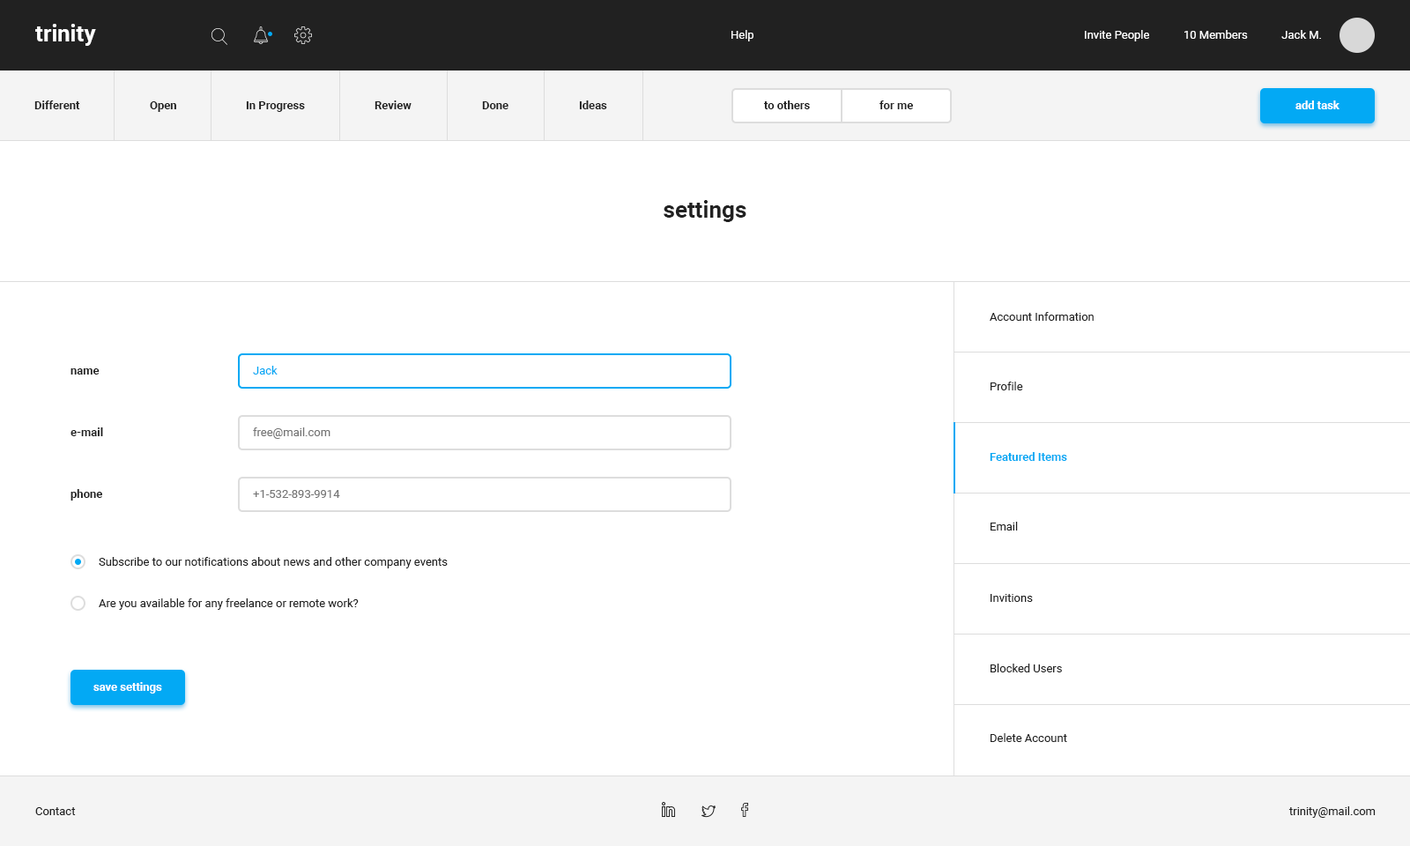
<style>
.page{position:relative;width:1410px;height:846px;background:#ffffff}
.page>*{position:absolute;margin:0}
.t1{font:22.9px "Roboto-Bold";color:#ffffff}
.t2{font:11.5px "Roboto-Regular";color:#ffffff}
.t3{font:11.5px "Roboto-Bold";color:#212121}
.t4{font:11.5px "Roboto-Bold";color:#ffffff}
.t5{font:22.9px "Roboto-Bold";color:#212121}
.t6{font:11.5px "Roboto-Regular";color:#212121}
.t7{font:11.5px "Roboto-Regular";color:#03a9f4}
.t8{font:11.5px "Roboto-Regular";color:#757575}
.t9{font:11.5px "Roboto-Bold";color:#03a9f4}
</style>
<div class="page">
<p class="t1" style="left:35px;top:24px;width:61px;height:22px">trinity</p>
<p class="t2" style="left:731px;top:30px;width:22px;height:11px">Help</p>
<p class="t2" style="left:1085px;top:30px;width:236px;height:11px">Invite People            10 Members            Jack M.</p>
<p class="t3" style="left:34px;top:100px;width:46px;height:9px">Different</p>
<p class="t3" style="left:150px;top:101px;width:26px;height:11px">Open</p>
<p class="t3" style="left:246px;top:101px;width:59px;height:11px">In Progress</p>
<p class="t3" style="left:374px;top:100px;width:37px;height:9px">Review</p>
<p class="t3" style="left:482px;top:101px;width:26px;height:8px">Done</p>
<p class="t3" style="left:579px;top:100px;width:28px;height:9px">Ideas</p>
<p class="t3" style="left:763px;top:100px;width:47px;height:9px">to others</p>
<p class="t3" style="left:879px;top:100px;width:34px;height:9px">for me</p>
<p class="t4" style="left:1295px;top:100px;width:44px;height:9px">add task</p>
<p class="t5" style="left:663px;top:200px;width:83px;height:22px">settings</p>
<p class="t6" style="left:989px;top:312px;width:104px;height:9px">Account Information</p>
<p class="t7" style="left:253px;top:366px;width:25px;height:8px">Jack</p>
<p class="t3" style="left:70px;top:368px;width:30px;height:6px">name</p>
<p class="t6" style="left:990px;top:382px;width:33px;height:8px">Profile</p>
<p class="t3" style="left:70px;top:427px;width:33px;height:9px">e-mail</p>
<p class="t8" style="left:253px;top:427px;width:77px;height:12px">free@mail.com</p>
<p class="t9" style="left:989px;top:452px;width:78px;height:9px">Featured Items</p>
<p class="t3" style="left:70px;top:489px;width:32px;height:11px">phone</p>
<p class="t8" style="left:253px;top:490px;width:87px;height:8px">+1-532-893-9914</p>
<p class="t6" style="left:990px;top:522px;width:28px;height:8px">Email</p>
<p class="t6" style="left:99px;top:557px;width:349px;height:11px">Subscribe to our notifications about news and other company events</p>
<p class="t6" style="left:990px;top:594px;width:43px;height:8px">Invitions</p>
<p class="t6" style="left:99px;top:598px;width:260px;height:12px">Are you available for any freelance or remote work?</p>
<p class="t6" style="left:990px;top:663px;width:72px;height:9px">Blocked Users</p>
<p class="t4" style="left:93px;top:682px;width:69px;height:11px">save settings</p>
<p class="t6" style="left:990px;top:733px;width:77px;height:9px">Delete Account</p>
<p class="t6" style="left:35px;top:807px;width:41px;height:8px">Contact</p>
<p class="t6" style="left:1288px;top:806px;width:87px;height:12px">trinity@mail.com</p>
</div>
